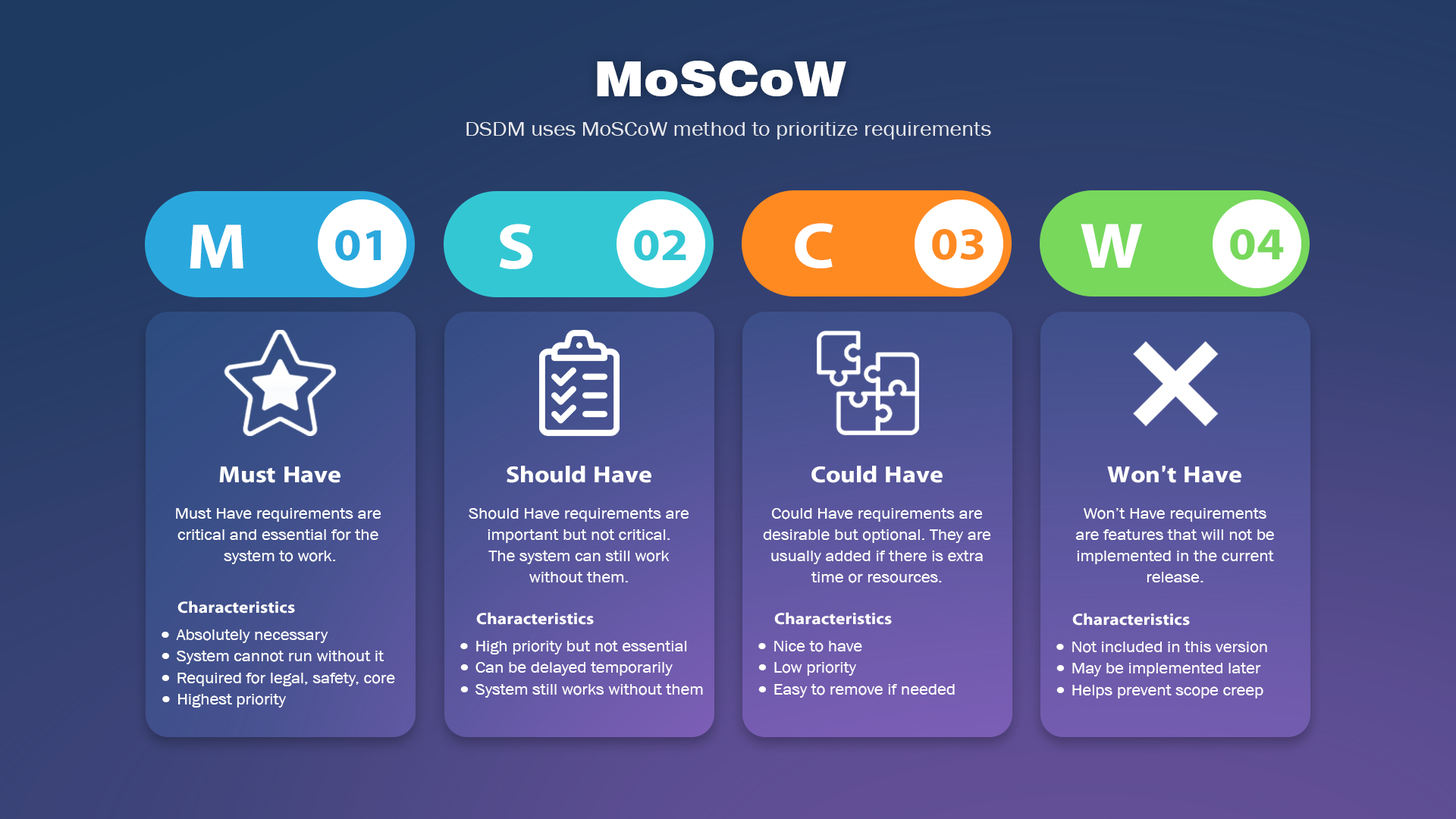
<style>
.page{position:relative;width:1456px;height:819px}
.page>*{position:absolute;margin:0}
.t1{font:48.5px "Swiss721BT-Black";color:#ffffff;scale:1.1 1}
.t2{font:20.5px "AA-Khmer-AngDaunPov";color:#ffffff;scale:1.1 1}
.t3{font:64.9px "iKampuchea001_O'Chrov";color:#ffffff;scale:1.1 1}
.t4{font:45.8px "iKampuchea001_O'Chrov";color:#2aa8dd;scale:1.1 1}
.t5{font:45.8px "iKampuchea001_O'Chrov";color:#33c7d4;scale:1.1 1}
.t6{font:45.8px "iKampuchea001_O'Chrov";color:#ff8a22;scale:1.1 1}
.t7{font:45.8px "iKampuchea001_O'Chrov";color:#77d85c;scale:1.1 1}
.t8{font:23.4px "iKampuchea001_O'Chrov";color:#ffffff;scale:1.1 1}
.t9{font:15.7px/21.3px "AA-Khmer-AngDaunPov";color:#ffffff;scale:1.1 1}
.t10{font:16.3px "iKampuchea001_O'Chrov";color:#ffffff;scale:1.1 1}
.t11{font:15.7px "AA-Khmer-AngDaunPov";color:#ffffff;scale:1.1 1}
.t12{font:15.6px "AA-Khmer-AngDaunPov";color:#ffffff;scale:1.1 1}
</style>
<div class="page">
<p class="t1" style="left:597px;top:61px;width:249px;height:35px">MoSCoW</p>
<p class="t2" style="left:466px;top:122px;width:525px;height:18px;opacity:0.86">DSDM uses MoSCoW method to prioritize requirements</p>
<p class="t3" style="left:190px;top:224px;width:53px;height:44px">M</p>
<p class="t4" style="left:335px;top:230px;width:46px;height:31px">01</p>
<p class="t3" style="left:499px;top:224px;width:34px;height:45px">S</p>
<p class="t5" style="left:634px;top:230px;width:52px;height:31px">02</p>
<p class="t3" style="left:795px;top:223px;width:38px;height:45px">C</p>
<p class="t6" style="left:932px;top:229px;width:52px;height:31px">03</p>
<p class="t3" style="left:1081px;top:224px;width:62px;height:44px">W</p>
<p class="t7" style="left:1230px;top:229px;width:54px;height:31px">04</p>
<p class="t8" style="left:219px;top:466px;width:121px;height:17px">Must Have</p>
<p class="t8" style="left:507px;top:466px;width:144px;height:17px">Should Have</p>
<p class="t8" style="left:811px;top:466px;width:132px;height:17px">Could Have</p>
<p class="t8" style="left:1107px;top:466px;width:134px;height:17px">Won’t Have</p>
<p class="t9" style="left:176px;top:508px;width:205px;height:56px;text-align:center">Must Have requirements are <br>critical and essential for the <br>system to work.</p>
<p class="t9" style="left:469px;top:508px;width:220px;height:75px;text-align:center">Should Have requirements are<br>important but not critical.<br>The system can still work<br>without them.</p>
<p class="t9" style="left:763px;top:508px;width:228px;height:75px;text-align:center">Could Have requirements are<br>desirable but optional. They are<br>usually added if there is extra<br>time or resources.</p>
<p class="t9" style="left:1075px;top:508px;width:199px;height:74px;text-align:center">Won’t Have requirements<br>are features that will not be<br>implemented in the current<br>release.</p>
<p class="t10" style="left:177px;top:601px;width:118px;height:12px">Characteristics</p>
<p class="t10" style="left:476px;top:612px;width:118px;height:13px">Characteristics</p>
<p class="t10" style="left:774px;top:612px;width:118px;height:13px">Characteristics</p>
<p class="t10" style="left:1072px;top:613px;width:118px;height:13px">Characteristics</p>
<p class="t11" style="left:176px;top:629px;width:152px;height:14px">Absolutely necessary</p>
<p class="t11" style="left:476px;top:641px;width:211px;height:13px">High priority but not essential</p>
<p class="t11" style="left:774px;top:641px;width:88px;height:11px">Nice to have</p>
<p class="t11" style="left:1072px;top:642px;width:195px;height:11px">Not included in this version</p>
<p class="t11" style="left:177px;top:651px;width:207px;height:13px">System cannot run without it</p>
<p class="t11" style="left:475px;top:662px;width:198px;height:14px">Can be delayed temporarily</p>
<p class="t11" style="left:774px;top:662px;width:82px;height:14px">Low priority</p>
<p class="t11" style="left:1072px;top:663px;width:189px;height:13px">May be implemented later</p>
<p class="t11" style="left:177px;top:673px;width:218px;height:13px">Required for legal, safety, core</p>
<p class="t11" style="left:475px;top:684px;width:228px;height:14px">System still works without them</p>
<p class="t11" style="left:774px;top:684px;width:181px;height:14px">Easy to remove if needed</p>
<p class="t11" style="left:1072px;top:685px;width:191px;height:13px">Helps prevent scope creep</p>
<p class="t12" style="left:178px;top:694px;width:108px;height:14px">Highest priority</p>
</div>
